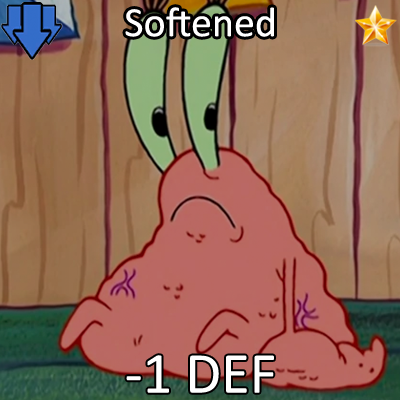
<style>
.page{position:relative;width:400px;height:400px}
.page>*{position:absolute;margin:0}
.t1{font:72px "Calibri";color:#ffffff}
.t2{font:100px "Calibri";color:#ffffff}
</style>
<div class="page">
<p class="t1" style="left:125px;top:7px;width:149px;height:30px">Softened</p>
<p class="t2" style="left:126px;top:355px;width:148px;height:38px">-1 DEF</p>
</div>
